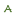
<style>
.page{position:relative;width:16px;height:16px;background:#ffffff}
.page>*{position:absolute;margin:0}
.t1{font:12px "FZSTK--GBK1-0";color:#547834}
</style>
<div class="page">
<p class="t1" style="left:3px;top:5px;width:9px;height:8px">A</p>
</div>
